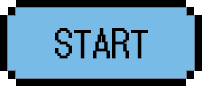
<style>
.page{position:relative;width:202px;height:86px;background:#78bbe6}
.page>*{position:absolute;margin:0}
.t1{font:36px "DotGothic16-Regular";color:#000000;font-weight:bold}
</style>
<div class="page">
<p class="t1" style="left:55px;top:28px;width:93px;height:31px">START</p>
</div>
